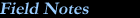
<style>
.page{position:relative;width:140px;height:18px;background:#000000}
.page>*{position:absolute;margin:0}
.t1{font:18px "Garamond-Bold";color:#99ccff;font-style:italic}
</style>
<div class="page">
<p class="t1" style="left:0px;top:2px;width:89px;height:13px">Field Notes</p>
</div>
